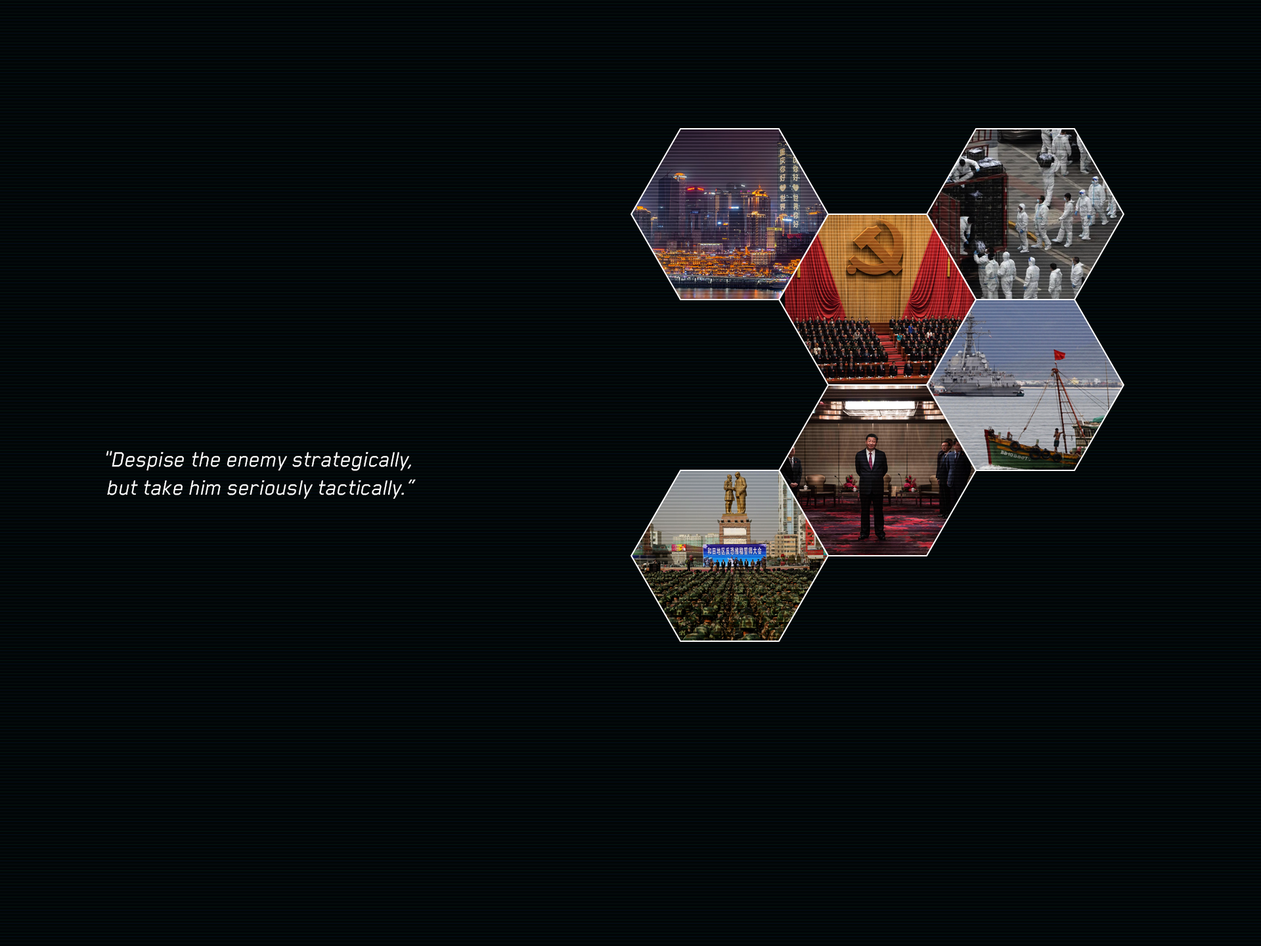
<style>
.page{position:relative;width:1261px;height:946px}
.page>*{position:absolute;margin:0}
.t1{font:23.6px "BlenderPro-BookItalic";color:#ffffff}
</style>
<div class="page">
<p class="t1" style="left:106px;top:451px;width:310px;height:48px;text-align:center">"Despise the enemy strategically, <br>but take him seriously tactically.“</p>
</div>
